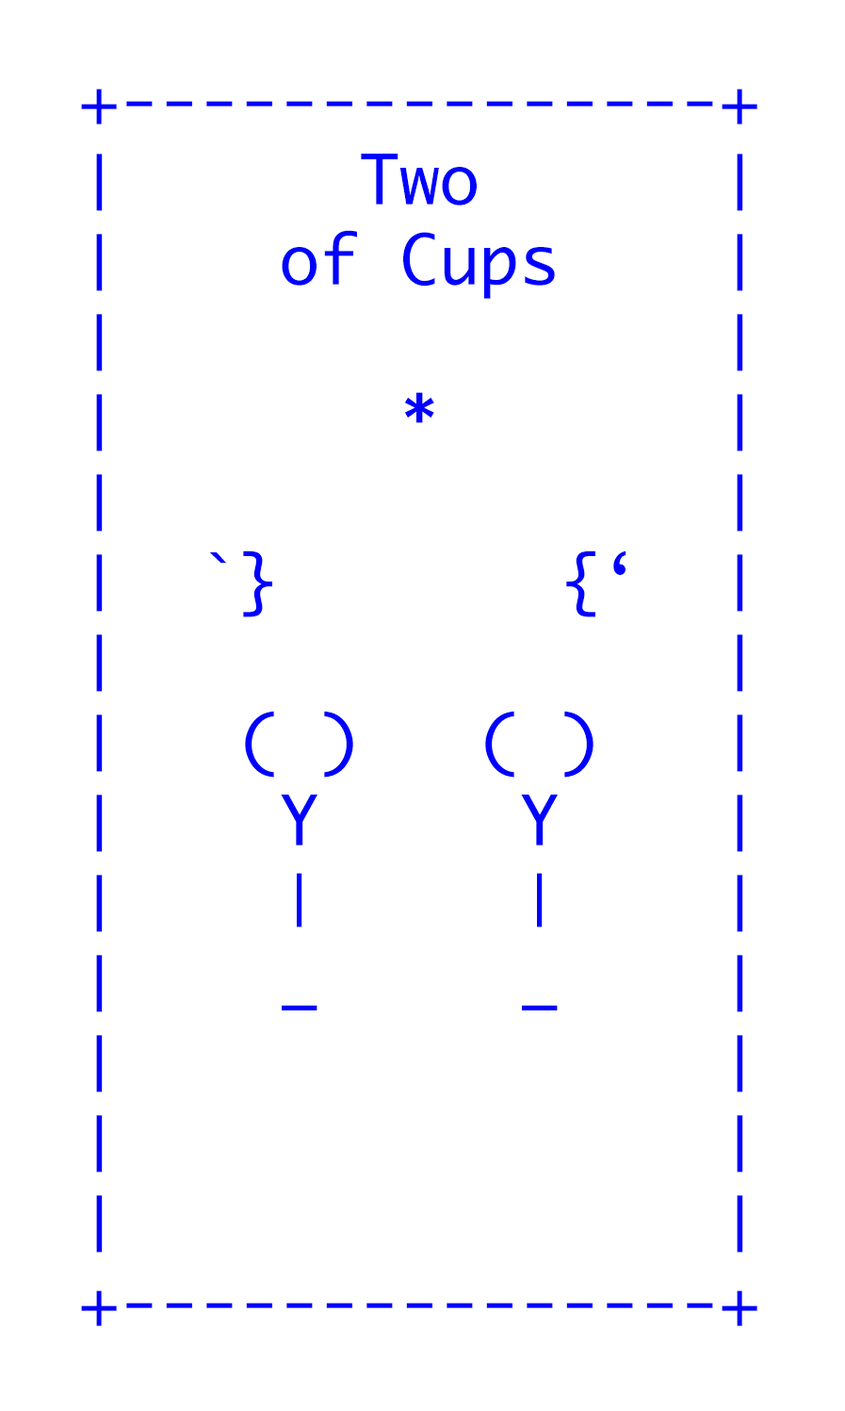
<style>
.page{position:relative;width:845px;height:1411px;background:#ffffff}
.page>*{position:absolute;margin:0}
.t1{font:66.7px "Monaco";color:#0000ff}
</style>
<div class="page">
<p class="t1" style="left:81px;top:89px;width:677px;height:1237px">+---------------+<br>│      Two      │<br>│    of Cups    │<br>│               │<br>│       *       │<br>│               │<br>│  `}       {‘  │<br>│               │ <br>│   ( )   ( )   │ <br>│    Y     Y    │<br>│    |     |    │ <br>│    _     _    │ <br>│               │<br>│               │<br>│               │<br>+---------------+</p>
</div>
